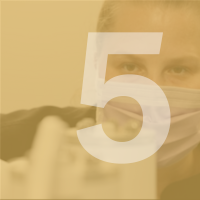
<style>
.page{position:relative;width:200px;height:200px}
.page>*{position:absolute;margin:0}
.t1{font:187.5px "PostGrotesk-Bold";color:#e4d1b3}
</style>
<div class="page">
<p class="t1" style="left:76px;top:32px;width:95px;height:132px">5</p>
</div>
